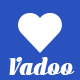
<style>
.page{position:relative;width:80px;height:80px;background:#2a52be}
.page>*{position:absolute;margin:0}
.t1{font:24px "InkredibleScript";color:#ffffff}
</style>
<div class="page">
<p class="t1" style="left:9px;top:57px;width:66px;height:18px">Vadoo</p>
</div>
